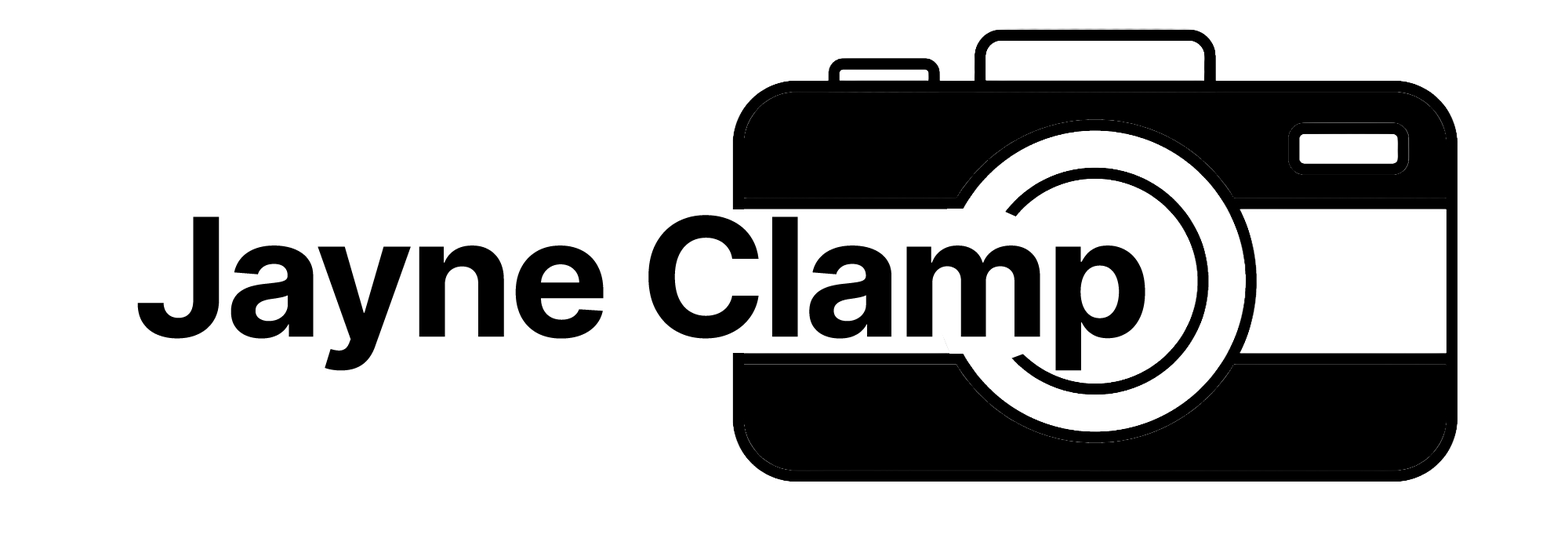
<style>
.page{position:relative;width:1568px;height:549px;background:#ffffff}
.page>*{position:absolute;margin:0}
.t1{font:164.6px "Inter-Bold";letter-spacing:-0.025em;color:#000000}
</style>
<div class="page">
<p class="t1" style="left:137px;top:215px;width:1008px;height:156px">Jayne Clamp</p>
</div>
